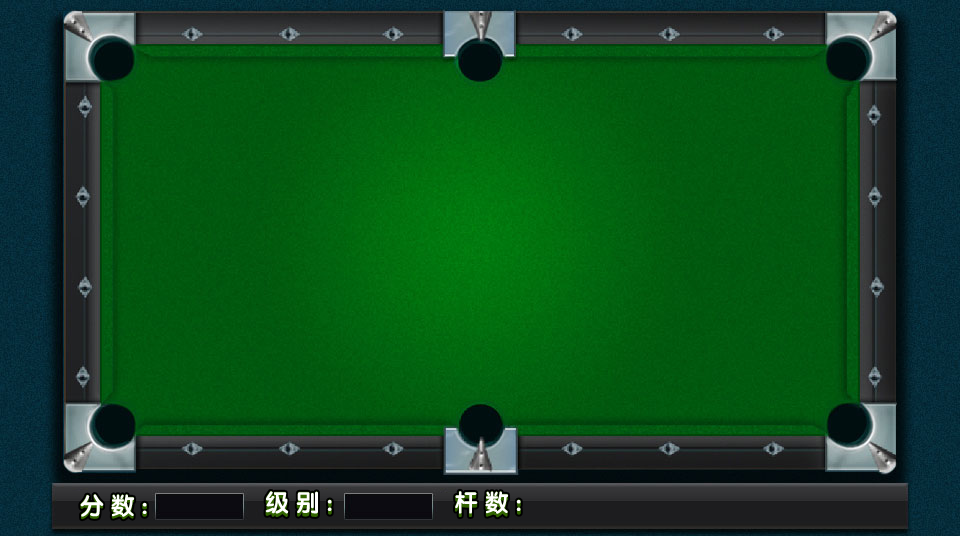
<style>
.page{position:relative;width:960px;height:536px}
.page>*{position:absolute;margin:0}
.t1{font:24px "JCuYuan";letter-spacing:0.3em;color:#ffffff}
</style>
<div class="page">
<p class="t1" style="left:80px;top:494px;width:67px;height:23px">分数:</p>
<p class="t1" style="left:265px;top:491px;width:67px;height:23px">级别:</p>
<p class="t1" style="left:455px;top:491px;width:66px;height:23px">杆数:</p>
</div>
